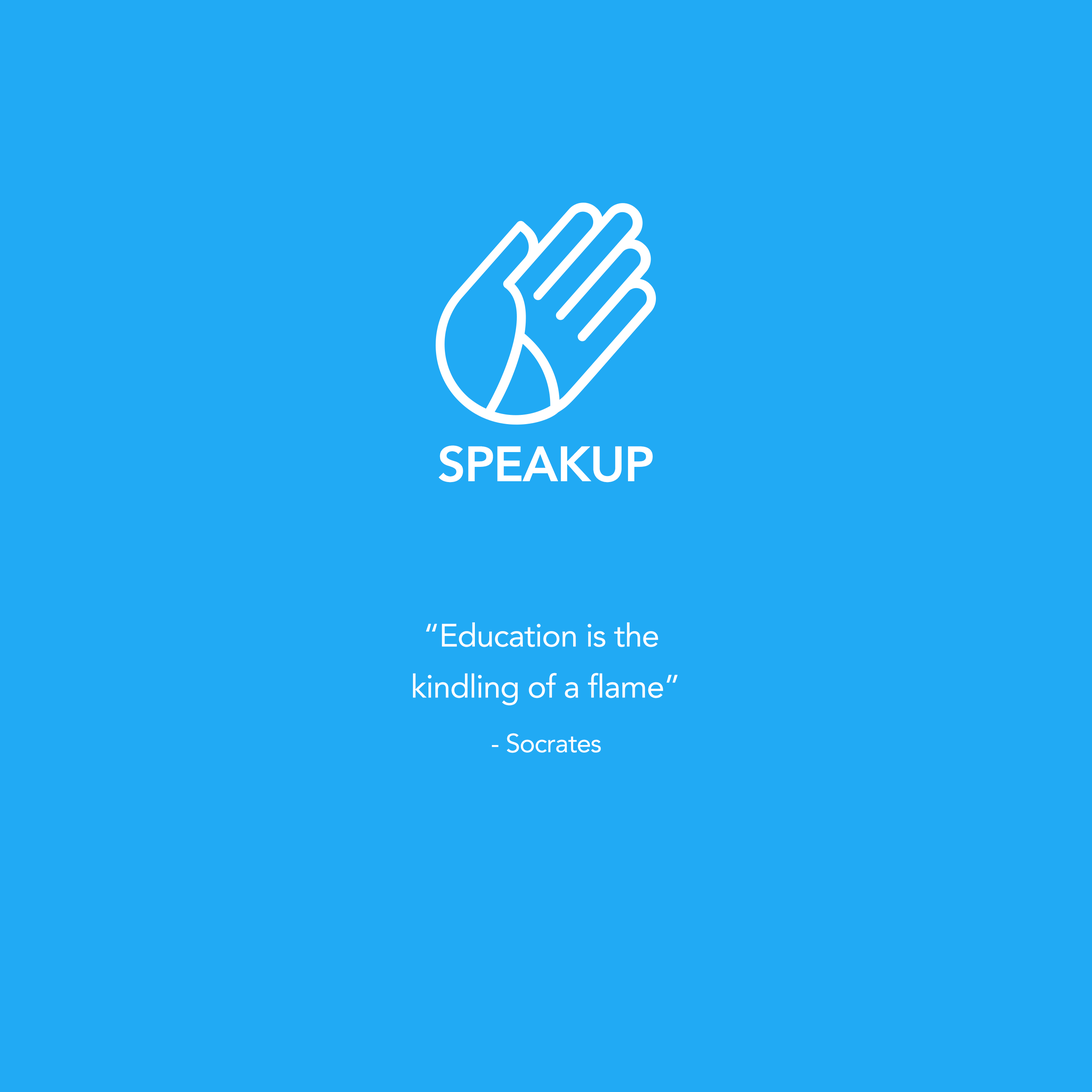
<style>
.page{position:relative;width:1092px;height:1092px;background:#21aaf4}
.page>*{position:absolute;margin:0}
.t1{font:49.1px "Avenir-Heavy";letter-spacing:-0.02em;color:#ffffff}
.t2{font:32px/51.1px "Avenir-Roman";letter-spacing:-0.02em;color:#fefefe}
.t3{font:26px/48.7px "Avenir-Roman";letter-spacing:-0.02em;color:#fefefe}
</style>
<div class="page">
<p class="t1" style="left:438px;top:445px;width:215px;height:37px">SPEAKUP</p>
<p class="t2" style="left:413px;top:622px;width:265px;height:131px;text-align:center">“Education is the <br>kindling of a flame”<br><span class="t3">- Socrates</span></p>
</div>
